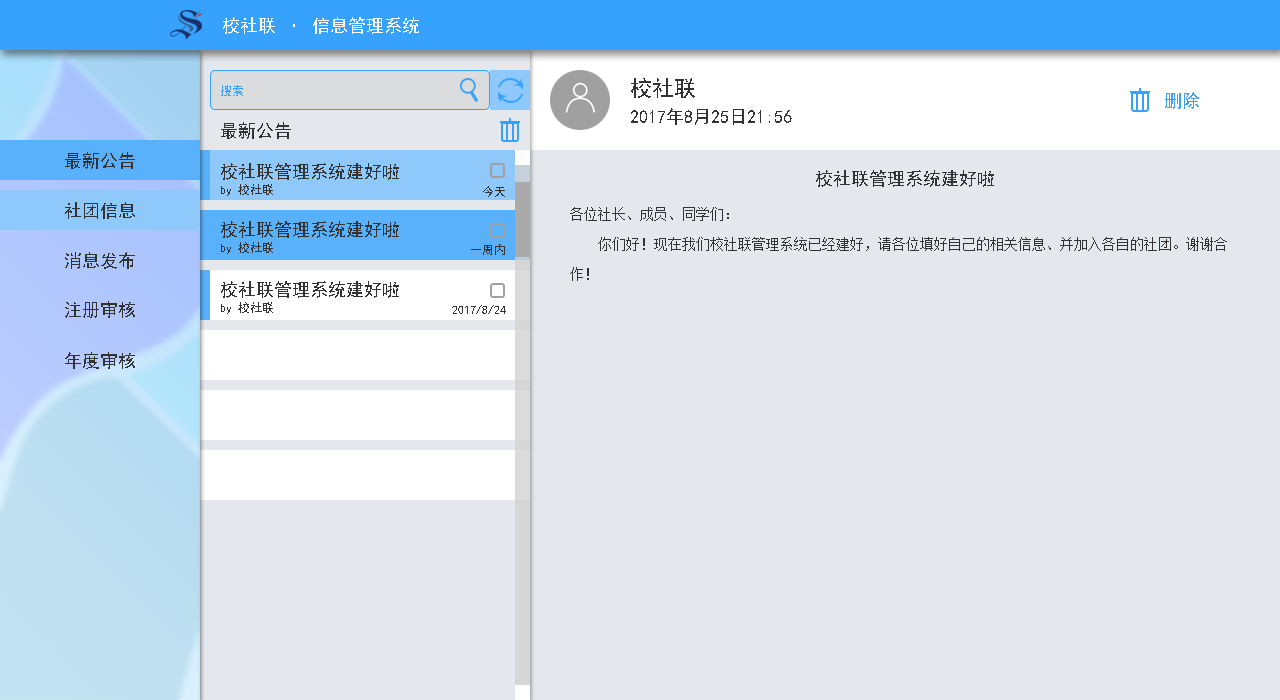
<style>
.page{position:relative;width:1280px;height:700px;background:#e4e8ec}
.page>*{position:absolute;margin:0}
.t1{font:18px "SimHei";color:#ffffff}
.t2{font:22px "SimHei";color:#333333}
.t3{font:12px "SimHei";color:#37a2fe}
.t4{font:18px "SimHei";color:#37a2fe}
.t5{font:18px "SimHei";color:#333333}
.t6{font:12px "SimHei";color:#333333}
.t7{font:14px/30px "SimSun";color:#333333}
</style>
<div class="page">
<p class="t1" style="left:223px;top:17px;width:196px;height:17px">校社联 · 信息管理系统</p>
<p class="t2" style="left:631px;top:78px;width:64px;height:20px">校社联</p>
<p class="t3" style="left:221px;top:85px;width:22px;height:11px">搜索</p>
<p class="t4" style="left:1165px;top:92px;width:34px;height:17px">删除</p>
<p class="t5" style="left:631px;top:108px;width:161px;height:17px">2017年8月25日21:56</p>
<p class="t5" style="left:221px;top:122px;width:70px;height:17px">最新公告</p>
<p class="t5" style="left:65px;top:152px;width:70px;height:17px">最新公告</p>
<p class="t5" style="left:221px;top:163px;width:178px;height:17px">校社联管理系统建好啦</p>
<p class="t5" style="left:816px;top:170px;width:178px;height:17px">校社联管理系统建好啦</p>
<p class="t6" style="left:221px;top:184px;width:52px;height:12px">by 校社联</p>
<p class="t6" style="left:483px;top:186px;width:22px;height:11px">今天</p>
<p class="t5" style="left:65px;top:202px;width:70px;height:17px">社团信息</p>
<p class="t7" style="left:570px;top:207px;width:657px;height:74px">各位社长、成员、同学们：<br>    你们好！现在我们校社联管理系统已经建好，请各位填好自己的相关信息、并加入各自的社团。谢谢合<br>作！</p>
<p class="t5" style="left:221px;top:221px;width:178px;height:17px">校社联管理系统建好啦</p>
<p class="t6" style="left:221px;top:242px;width:52px;height:12px">by 校社联</p>
<p class="t6" style="left:471px;top:244px;width:34px;height:11px">一周内</p>
<p class="t5" style="left:65px;top:252px;width:70px;height:17px">消息发布</p>
<p class="t5" style="left:221px;top:281px;width:178px;height:17px">校社联管理系统建好啦</p>
<p class="t5" style="left:65px;top:301px;width:70px;height:17px">注册审核</p>
<p class="t6" style="left:221px;top:302px;width:52px;height:12px">by 校社联</p>
<p class="t6" style="left:452px;top:305px;width:54px;height:9px">2017/8/24</p>
<p class="t5" style="left:65px;top:352px;width:70px;height:17px">年度审核</p>
</div>
